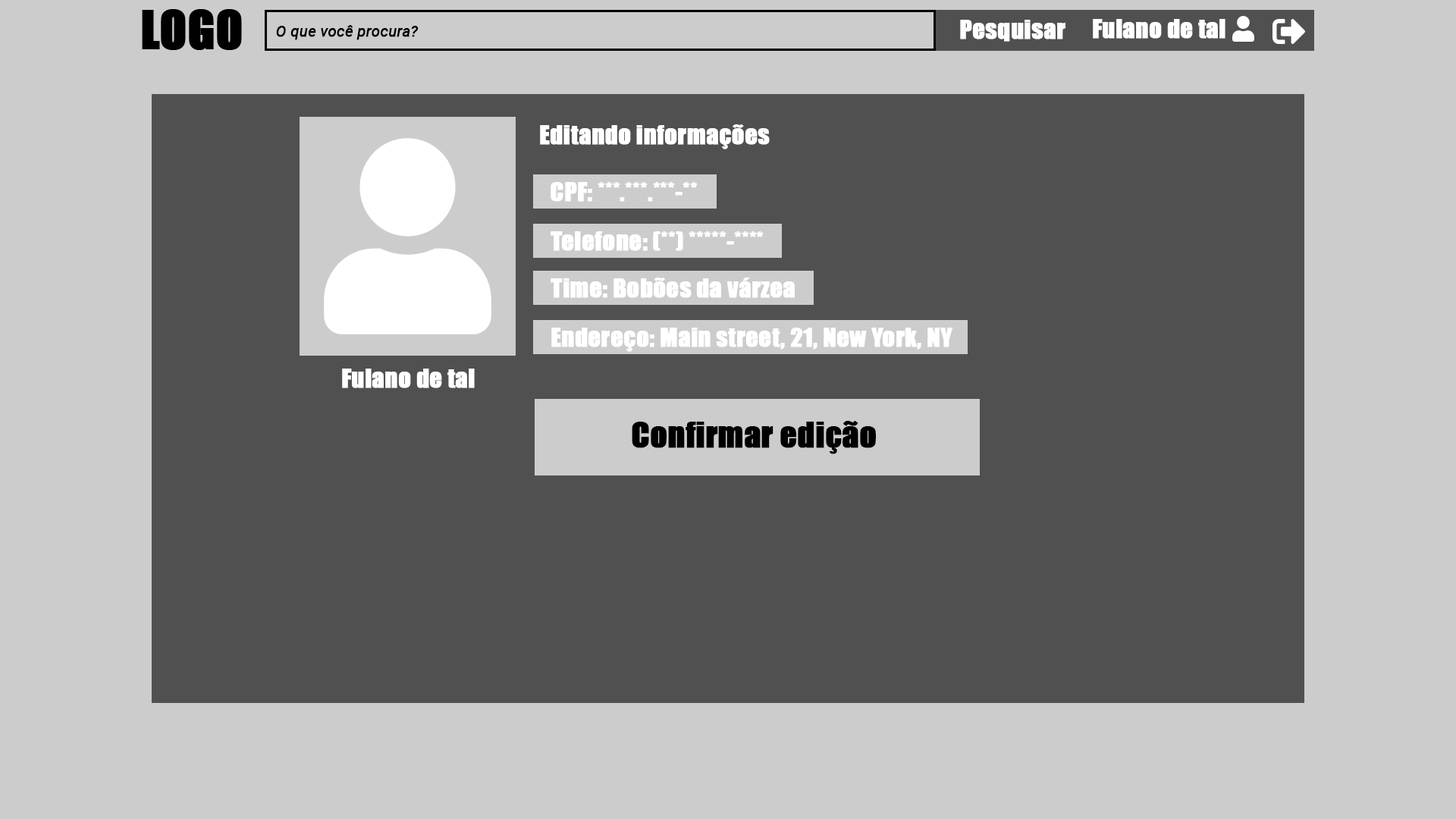
<style>
.page{position:relative;width:1456px;height:819px;background:#cccccc}
.page>*{position:absolute;margin:0}
.t1{font:15.2px "Roboto-Italic";color:#000000;font-weight:bold}
.t2{font:24.3px "Impact";color:#ffffff;font-weight:bold}
.t3{font:24.1px "Impact";color:#ffffff;font-weight:bold}
.t4{font:32.4px "Impact";color:#000000;font-weight:bold}
</style>
<div class="page">
<p class="t1" style="left:276px;top:25px;width:143px;height:15px">O que você procura?</p>
<p class="t2" style="left:960px;top:20px;width:105px;height:22px">Pesquisar</p>
<p class="t2" style="left:1093px;top:19px;width:132px;height:20px">Fulano de tal</p>
<p class="t3" style="left:540px;top:124px;width:230px;height:25px">Editando informações</p>
<p class="t2" style="left:551px;top:182px;width:147px;height:20px">CPF: ***.***.***-**</p>
<p class="t2" style="left:551px;top:231px;width:213px;height:20px">Telefone: (**) *****-****</p>
<p class="t2" style="left:551px;top:278px;width:244px;height:20px">Time: Bobões da várzea</p>
<p class="t2" style="left:551px;top:328px;width:401px;height:24px">Endereço: Main street, 21, New York, NY</p>
<p class="t2" style="left:342px;top:369px;width:133px;height:19px">Fulano de tal</p>
<p class="t4" style="left:632px;top:421px;width:244px;height:33px">Confirmar edição</p>
</div>
